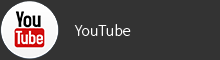
<style>
.page{position:relative;width:220px;height:60px;background:#333333}
.page>*{position:absolute;margin:0}
.t1{font:16px "SourceSansPro-Light";color:#ffffff}
</style>
<div class="page">
<p class="t1" style="left:74px;top:24px;width:57px;height:12px">YouTube</p>
</div>
